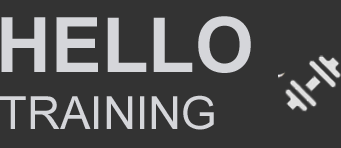
<style>
.page{position:relative;width:341px;height:148px;background:#333333}
.page>*{position:absolute;margin:0}
.t1{font:76.2px "Arial-BoldMT";color:#d5d6da}
.t2{font:45.7px "ArialMT";color:#d5d6da}
</style>
<div class="page">
<p class="t1" style="left:1px;top:16px;width:250px;height:57px">HELLO</p>
<p class="t2" style="left:0px;top:95px;width:214px;height:35px">TRAINING</p>
</div>
